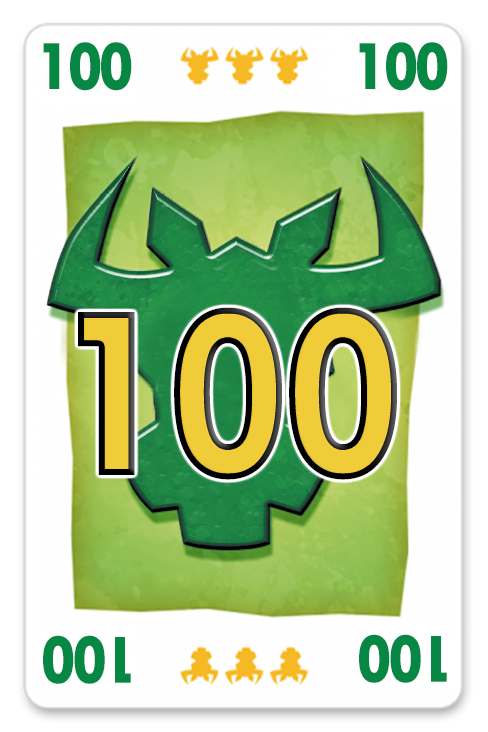
<style>
.page{position:relative;width:488px;height:732px;background:#ffffff}
.page>*{position:absolute;margin:0}
.t1{font:70px "TwCenMT-CondensedExtraBold";letter-spacing:-0.04em;color:#078744}
.t2{font:250px "TwCenMT-CondensedExtraBold";letter-spacing:-0.03em;color:#f1cc39}
</style>
<div class="page">
<p class="t1" style="left:43px;top:42px;width:89px;height:49px">100</p>
<p class="t1" style="left:359px;top:42px;width:89px;height:49px">100</p>
<p class="t2" style="left:78px;top:307px;width:319px;height:173px">100</p>
<p class="t1" style="left:43px;top:635px;width:88px;height:49px;rotate:180deg">100</p>
<p class="t1" style="left:359px;top:634px;width:88px;height:49px;rotate:180deg">100</p>
</div>
